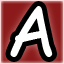
<style>
.page{position:relative;width:64px;height:64px;background:#000000}
.page>*{position:absolute;margin:0}
.t1{font:70px "ComicSansMS";color:#ffffff}
</style>
<div class="page">
<p class="t1" style="left:10px;top:6px;width:43px;height:51px">A</p>
</div>
